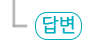
<style>
.page{position:relative;width:89px;height:50px;background:#ffffff}
.page>*{position:absolute;margin:0}
.t1{font:18px "NanumGothic";letter-spacing:-0.02em;color:#04adbf;font-weight:bold}
</style>
<div class="page">
<p class="t1" style="left:43px;top:16px;width:32px;height:18px">답변</p>
</div>
